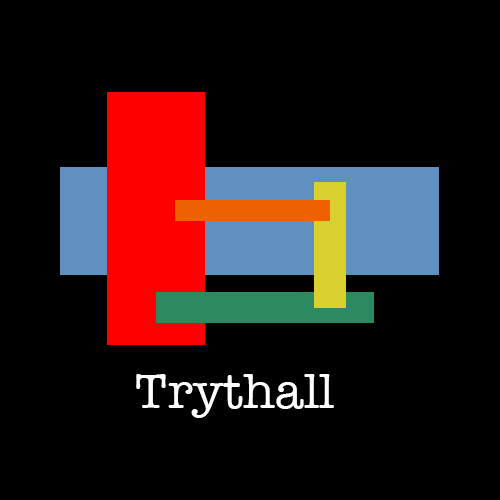
<style>
.page{position:relative;width:500px;height:500px;background:#000000}
.page>*{position:absolute;margin:0}
.t1{font:50px "AmericanTypewriter";color:#ffffff}
</style>
<div class="page">
<p class="t1" style="left:136px;top:374px;width:198px;height:44px">Trythall</p>
</div>
